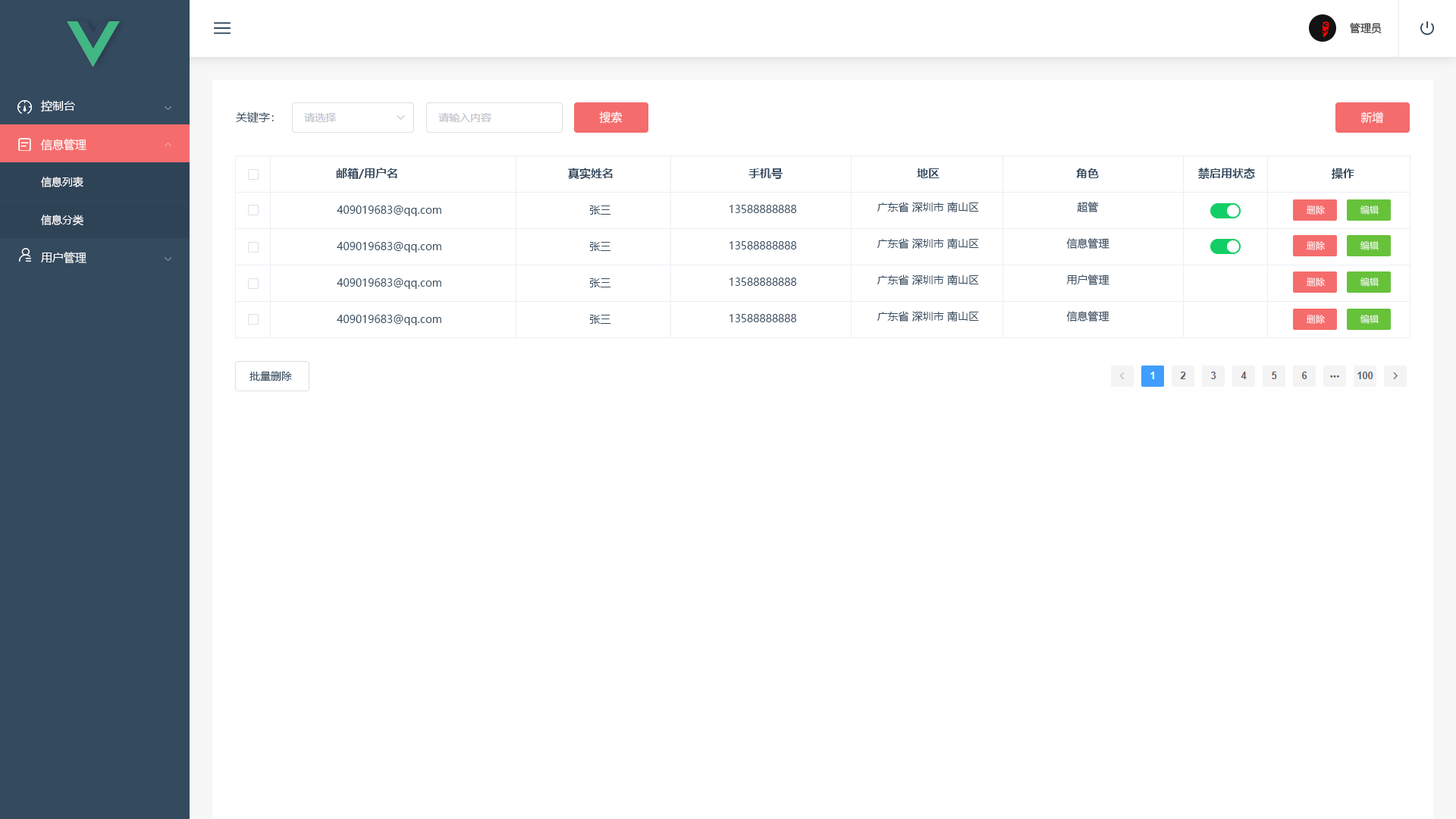
<style>
.page{position:relative;width:1456px;height:819px;background:#ffffff}
.page>*{position:absolute;margin:0}
.t1{font:10.6px "MicrosoftYaHei";color:#252525}
.t2{font:11.4px "MicrosoftYaHei";color:#ffffff}
.t3{font:11.4px "MicrosoftYaHei";color:#344a5f}
.t4{font:10.6px/37.9px "MicrosoftYaHei";color:#ffffff}
.t5{font:11.4px/37.9px "MicrosoftYaHei";color:#ffffff}
.t6{font:11.4px "MicrosoftYaHei-Bold";color:#344a5f}
.t7{font:10.6px/36.4px "MicrosoftYaHei";color:#344a5f}
.t8{font:9.1px "MicrosoftYaHei";color:#ffffff}
.t9{font:10.6px "MicrosoftYaHei";color:#344a5f}
</style>
<div class="page">
<p class="t1" style="left:1350px;top:23px;width:32px;height:11px">管理员</p>
<p class="t2" style="left:41px;top:100px;width:34px;height:12px">控制台</p>
<p class="t3" style="left:236px;top:111px;width:38px;height:12px">关键字：</p>
<p class="t2" style="left:599px;top:111px;width:24px;height:13px">搜索</p>
<p class="t2" style="left:1360px;top:111px;width:23px;height:13px">新增</p>
<p class="t4" style="left:41px;top:139px;width:45px;height:87px"><span class="t5">信息管理<br></span>信息列表<br>信息分类</p>
<p class="t6" style="left:336px;top:168px;width:61px;height:11px">邮箱/用户名</p>
<p class="t6" style="left:568px;top:168px;width:45px;height:12px">真实姓名</p>
<p class="t6" style="left:748px;top:168px;width:35px;height:11px">手机号</p>
<p class="t6" style="left:917px;top:168px;width:23px;height:10px">地区</p>
<p class="t6" style="left:1076px;top:168px;width:23px;height:10px">角色</p>
<p class="t6" style="left:1198px;top:168px;width:57px;height:11px">禁启用状态</p>
<p class="t6" style="left:1332px;top:168px;width:22px;height:11px">操作</p>
<p class="t7" style="left:337px;top:206px;width:104px;height:119px;text-align:center">409019683@qq.com<br>409019683@qq.com<br>409019683@qq.com<br>409019683@qq.com</p>
<p class="t7" style="left:589px;top:206px;width:22px;height:118px;text-align:center">张三<br>张三<br>张三<br>张三</p>
<p class="t7" style="left:729px;top:205px;width:68px;height:117px;text-align:center">13588888888<br>13588888888<br>13588888888<br>13588888888</p>
<p class="t7" style="left:877px;top:202px;width:102px;height:120px">广东省 深圳市 南山区<br>广东省 深圳市 南山区<br>广东省 深圳市 南山区<br>广东省 深圳市 南山区</p>
<p class="t7" style="left:1066px;top:202px;width:43px;height:120px;text-align:center">超管<br>信息管理<br>用户管理<br>信息管理</p>
<p class="t8" style="left:1307px;top:206px;width:18px;height:9px">删除</p>
<p class="t8" style="left:1360px;top:206px;width:19px;height:9px">编辑</p>
<p class="t8" style="left:1307px;top:241px;width:18px;height:9px">删除</p>
<p class="t8" style="left:1360px;top:241px;width:19px;height:9px">编辑</p>
<p class="t2" style="left:41px;top:252px;width:45px;height:11px">用户管理</p>
<p class="t8" style="left:1307px;top:278px;width:18px;height:9px">删除</p>
<p class="t8" style="left:1360px;top:278px;width:19px;height:9px">编辑</p>
<p class="t8" style="left:1307px;top:315px;width:18px;height:9px">删除</p>
<p class="t8" style="left:1360px;top:315px;width:19px;height:9px">编辑</p>
<p class="t9" style="left:249px;top:371px;width:43px;height:10px">批量删除</p>
</div>
